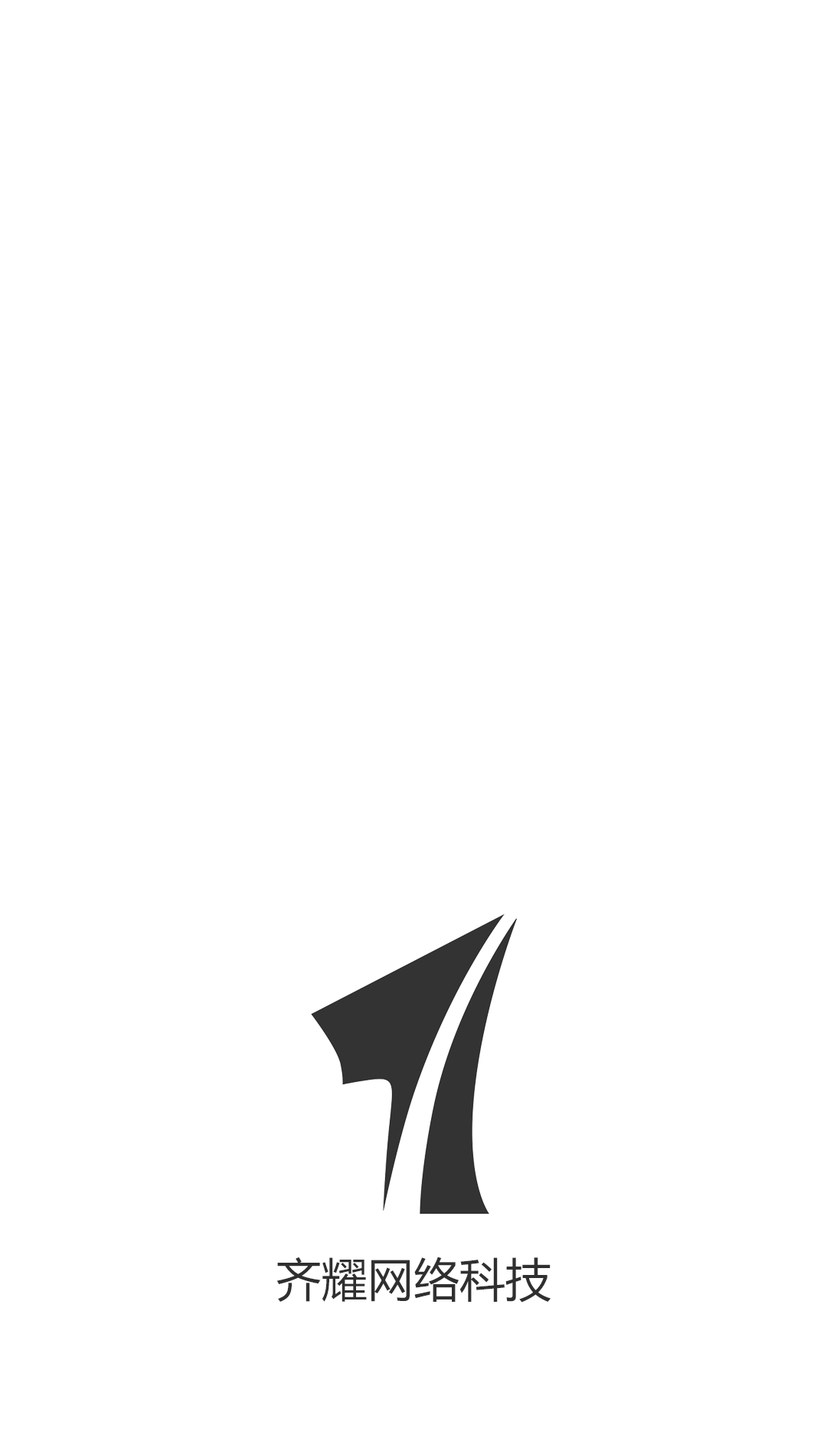
<style>
.page{position:relative;width:827px;height:1442px;background:#ffffff}
.page>*{position:absolute;margin:0}
.t1{font:46px "MicrosoftYaHei";color:#2f2f2f}
</style>
<div class="page">
<p class="t1" style="left:277px;top:1256px;width:274px;height:46px">齐耀网络科技</p>
</div>
